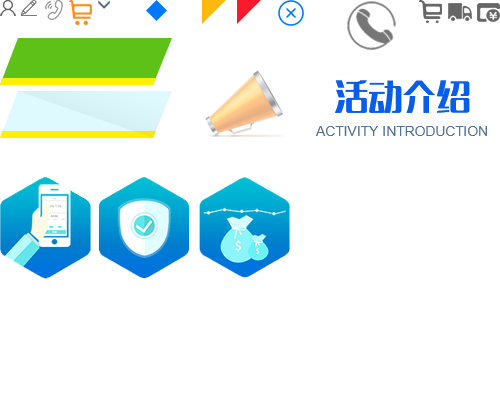
<style>
.page{position:relative;width:500px;height:400px;background:#ffffff}
.page>*{position:absolute;margin:0}
.t1{font:34px "MFLangQian_Noncommercial-Regular";color:#075eec}
.t2{font:14px "ArialMT";color:#567498;text-transform:uppercase}
</style>
<div class="page">
<p class="t1" style="left:334px;top:80px;width:136px;height:33px">活动介绍</p>
<p class="t2" style="left:316px;top:126px;width:171px;height:10px">activity introduction</p>
</div>
